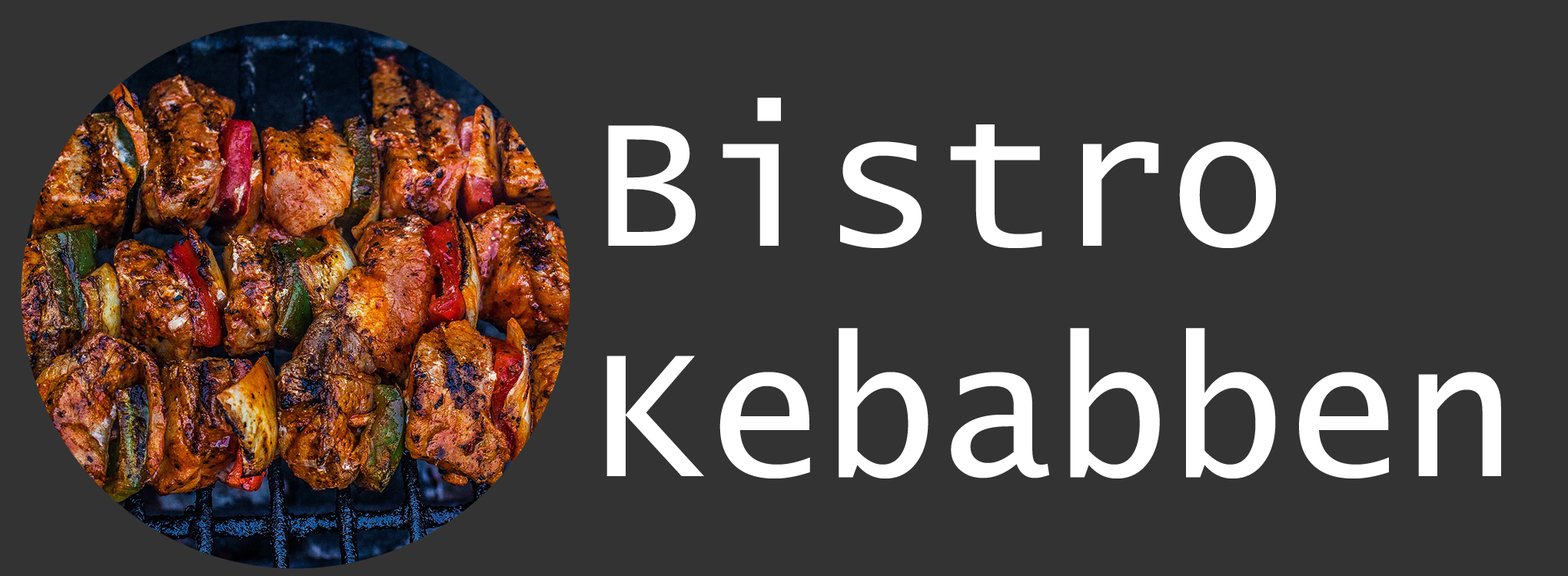
<style>
.page{position:relative;width:1568px;height:576px;background:#333333}
.page>*{position:absolute;margin:0}
.t1{font:192.2px "LucidaConsole";color:#ffffff}
</style>
<div class="page">
<p class="t1" style="left:606px;top:98px;width:895px;height:381px">Bistro<br>Kebabben</p>
</div>
